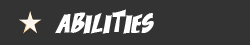
<style>
.page{position:relative;width:250px;height:45px;background:#333333}
.page>*{position:absolute;margin:0}
.t1{font:30px "HoustonComicsPersonalUse";color:#ffffff}
</style>
<div class="page">
<p class="t1" style="left:55px;top:9px;width:99px;height:25px">ABILITIES</p>
</div>
